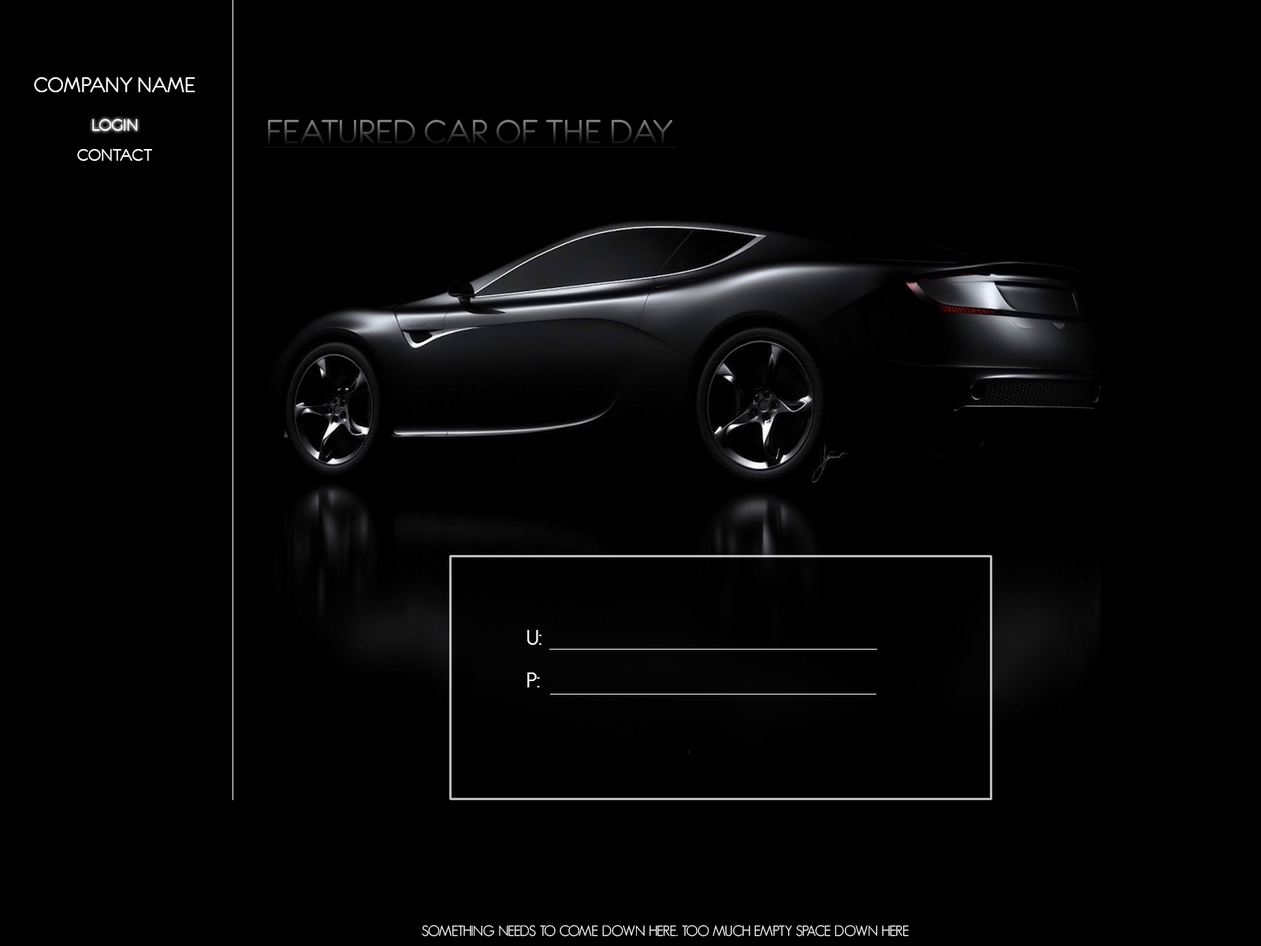
<style>
.page{position:relative;width:1261px;height:946px;background:#000000}
.page>*{position:absolute;margin:0}
.t1{font:23.6px "Eurofurenceregular";color:#ffffff}
.t2{font:18.9px "Eurofurenceregular";color:#ffffff}
.t3{font:14.2px "GeosansLight";color:#ffffff}
</style>
<div class="page">
<p class="t1" style="left:34px;top:77px;width:161px;height:15px">COMPANY NAME</p>
<p class="t2" style="left:92px;top:119px;width:46px;height:12px">LOGIN</p>
<p class="t2" style="left:77px;top:149px;width:75px;height:12px">CONTACT</p>
<p class="t1" style="left:527px;top:630px;width:14px;height:15px">U:</p>
<p class="t1" style="left:527px;top:672px;width:13px;height:15px">P:</p>
<p class="t3" style="left:422px;top:924px;width:487px;height:12px">SOMETHING NEEDS TO COME DOWN HERE. TOO MUCH EMPTY SPACE DOWN HERE</p>
</div>
